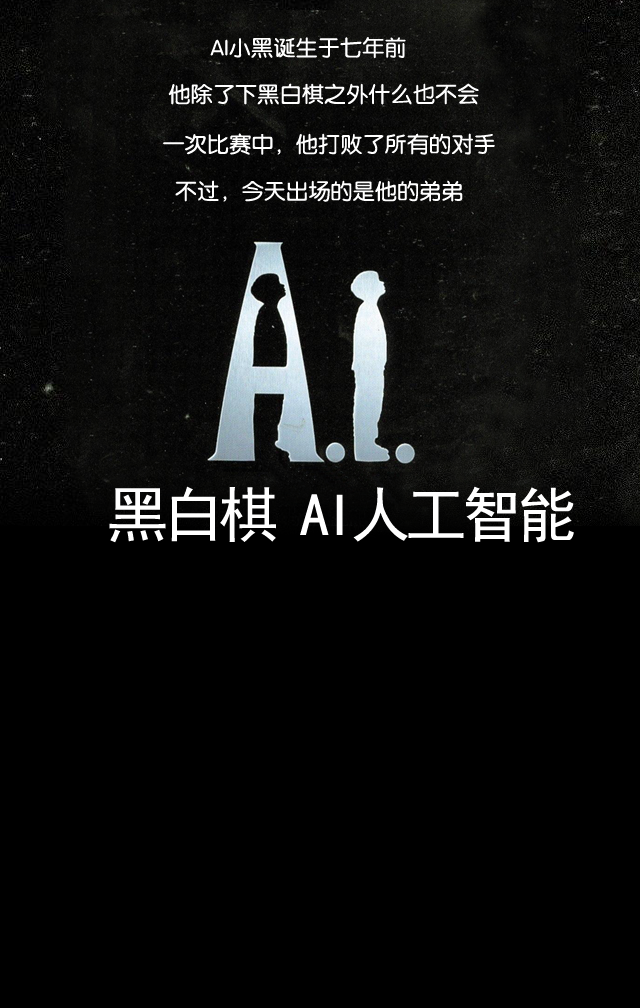
<style>
.page{position:relative;width:640px;height:1008px;background:#000000}
.page>*{position:absolute;margin:0}
.t1{font:22px "FZY3K--GBK1-0";letter-spacing:0.01em;color:#ffffff}
.t2{font:60px "SimHei";letter-spacing:-0.075em;color:#ffffff}
</style>
<div class="page">
<p class="t1" style="left:210px;top:37px;width:196px;height:22px">AI小黑诞生于七年前</p>
<p class="t1" style="left:168px;top:83px;width:311px;height:22px">他除了下黑白棋之外什么也不会</p>
<p class="t1" style="left:163px;top:133px;width:332px;height:22px">一次比赛中，他打败了所有的对手</p>
<p class="t1" style="left:175px;top:180px;width:288px;height:22px">不过，今天出场的是他的弟弟</p>
<p class="t2" style="left:109px;top:486px;width:465px;height:57px">黑白棋 AI人工智能</p>
</div>
